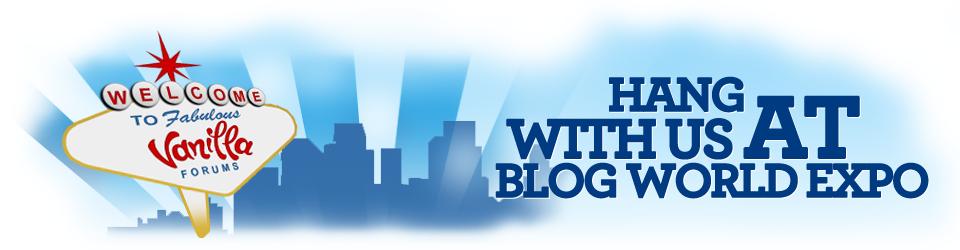
<style>
.page{position:relative;width:960px;height:250px}
.page>*{position:absolute;margin:0}
.t1{font:50px "Archer-Bold";letter-spacing:-0.075em;color:#003b82;text-transform:uppercase;font-weight:bold}
.t2{font:92.3px "Archer-Bold";letter-spacing:-0.075em;color:#003b82;text-transform:uppercase;font-weight:bold}
.t3{font:58.3px "Archer-Bold";letter-spacing:-0.075em;color:#003b82;text-transform:uppercase;font-weight:bold}
</style>
<div class="page">
<p class="t1" style="left:609px;top:76px;width:135px;height:37px">hang</p>
<p class="t2" style="left:743px;top:95px;width:117px;height:64px">at</p>
<p class="t3" style="left:506px;top:118px;width:227px;height:42px">With us</p>
<p class="t1" style="left:495px;top:162px;width:434px;height:37px">blog world expo</p>
</div>
